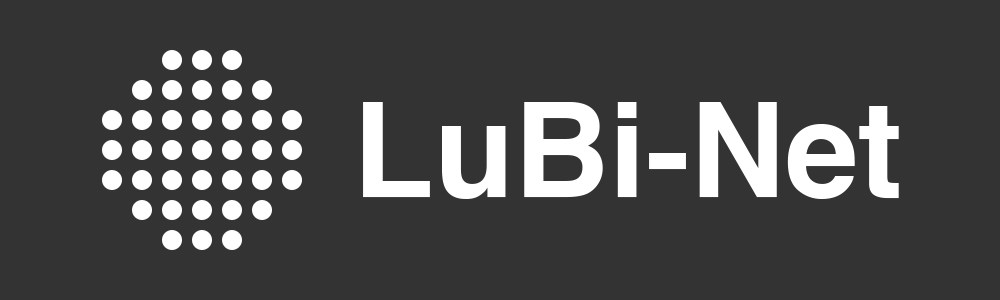
<style>
.page{position:relative;width:1000px;height:300px;background:#333333}
.page>*{position:absolute;margin:0}
.t1{font:131.8px "Helvetica-Bold";color:#ffffff}
</style>
<div class="page">
<p class="t1" style="left:363px;top:102px;width:536px;height:97px">LuBi-Net</p>
</div>
